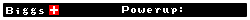
<style>
.page{position:relative;width:250px;height:20px;background:#000000}
.page>*{position:absolute;margin:0}
.t1{font:12px "PressStartReg";color:#ffffff}
.t2{font:8px "PressStartReg";color:#ffffff}
</style>
<div class="page">
<p class="t1" style="left:50px;top:6px;width:8px;height:8px">+</p>
<p class="t2" style="left:122px;top:6px;width:60px;height:8px">Powerup:</p>
<p class="t2" style="left:6px;top:7px;width:38px;height:8px">Biggs</p>
</div>
